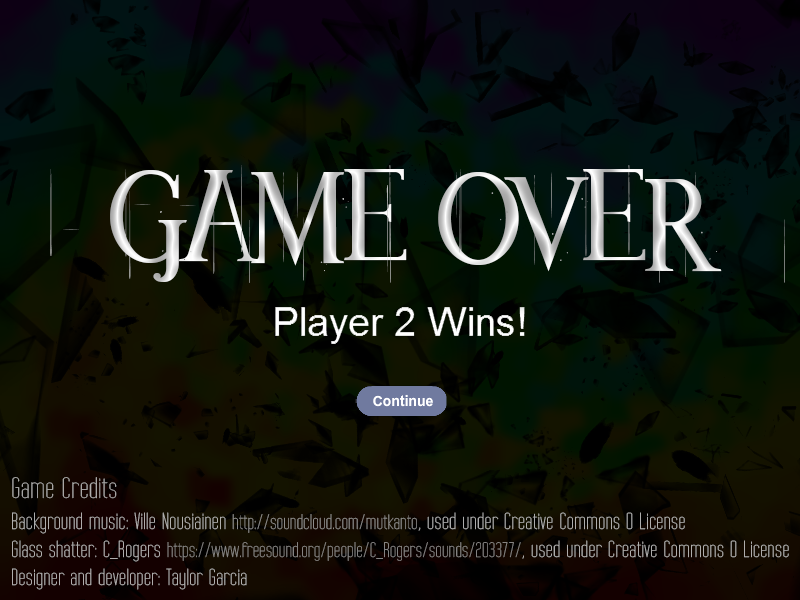
<style>
.page{position:relative;width:800px;height:600px}
.page>*{position:absolute;margin:0}
.t1{font:121.9px "Crackin"}
.t2{font:30px "TallFilmsExpanded";color:#afacac}
.t3{font:23.5px "TallFilmsExpanded";color:#ffffff}
.t4{font:21.2px "TallFilmsExpanded";color:#cecece}
.t5{font:21.2px "TallFilmsExpanded";color:#c3c2c2}
</style>
<div class="page">
<p class="t1" style="left:50px;top:165px;width:735px;height:118px">GAME OVER</p>
<p class="t2" style="left:12px;top:477px;width:105px;height:22px">Game Credits</p>
<p class="t3" style="left:12px;top:512px;width:777px;height:78px;opacity:0.54">Background music: Ville Nousiainen <span class="t4">http://soundcloud.com/mutkanto</span>, used under Creative Commons 0 License<br>Glass shatter: C_Rogers <span class="t5">https://www.freesound.org/people/C_Rogers/sounds/203377/</span>, used under Creative Commons 0 License<br>Designer and developer: Taylor Garcia</p>
</div>
